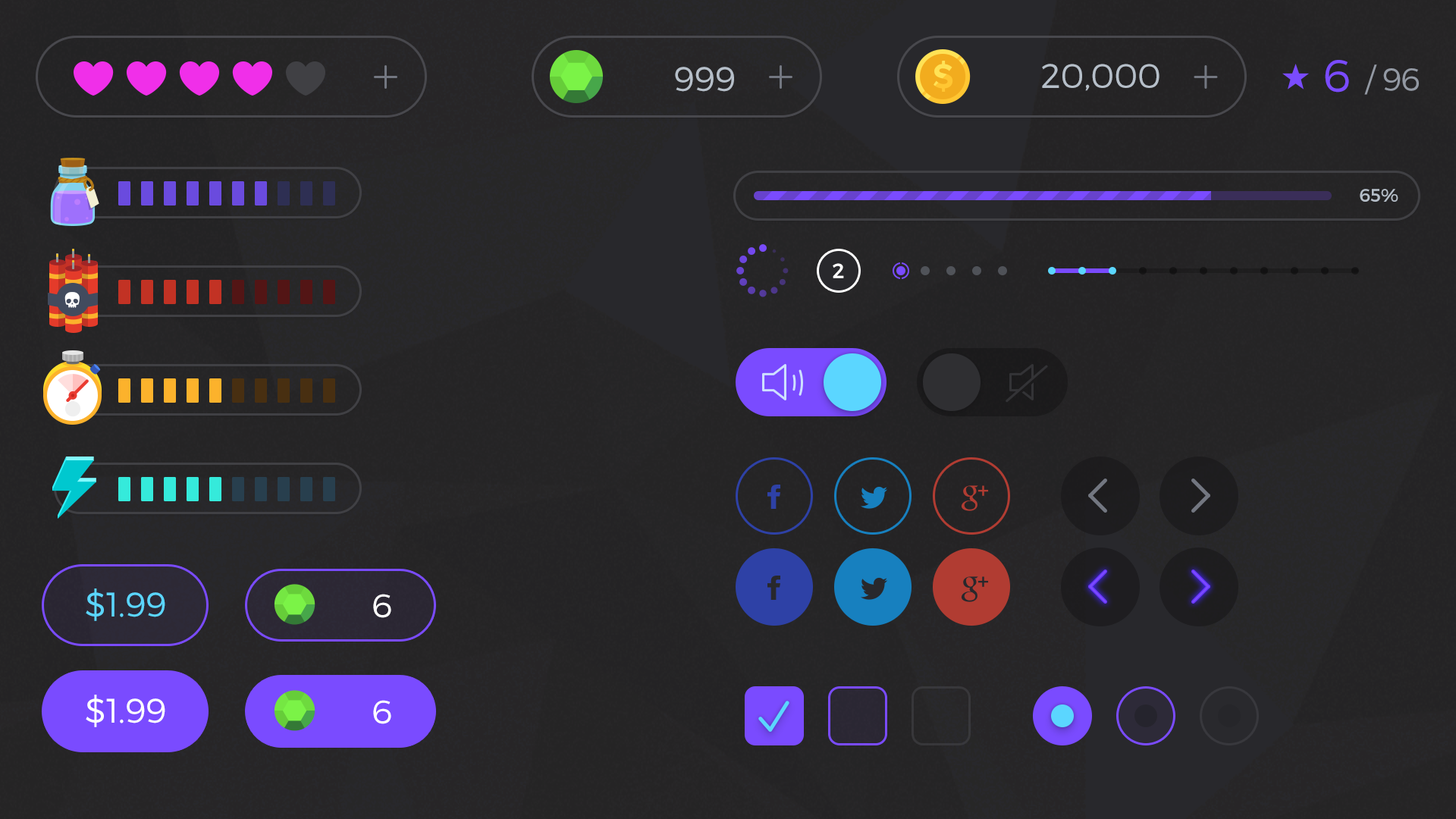
<style>
.page{position:relative;width:1456px;height:819px}
.page>*{position:absolute;margin:0}
.t1{font:34.1px "Montserrat-Light";color:#b6bfc9;text-transform:uppercase}
.t2{font:45.2px "Montserrat-Light";letter-spacing:-0.025em;color:#7a4bff;text-transform:uppercase}
.t3{font:31.6px "Montserrat-Light";letter-spacing:-0.025em;color:#9399a3;text-transform:uppercase}
.t4{font:18.2px "Montserrat-Regular";color:#b6bfc9;text-transform:uppercase}
.t5{font:20.5px "Montserrat-Regular";letter-spacing:0.04em;color:#ffffff}
.t6{font:34.1px "Montserrat-Light";color:#5bd6ff}
.t7{font:32.4px "Montserrat-Light";letter-spacing:-0.025em;color:#ffffff;text-transform:uppercase;scale:1.05 1}
.t8{font:34.1px "Montserrat-Light";color:#ffffff}
</style>
<div class="page">
<p class="t1" style="left:1042px;top:64px;width:117px;height:27px">20,000</p>
<p class="t2" style="left:1325px;top:60px;width:24px;height:33px">6</p>
<p class="t3" style="left:1364px;top:64px;width:55px;height:31px">/ 96</p>
<p class="t1" style="left:675px;top:67px;width:59px;height:25px">999</p>
<p class="t4" style="left:1360px;top:189px;width:38px;height:13px">65%</p>
<p class="t5" style="left:833px;top:263px;width:11px;height:15px">2</p>
<p class="t6" style="left:86px;top:588px;width:79px;height:33px">$1.99</p>
<p class="t7" style="left:373px;top:594px;width:18px;height:24px">6</p>
<p class="t8" style="left:86px;top:695px;width:79px;height:32px">$1.99</p>
<p class="t7" style="left:373px;top:700px;width:18px;height:24px">6</p>
</div>
